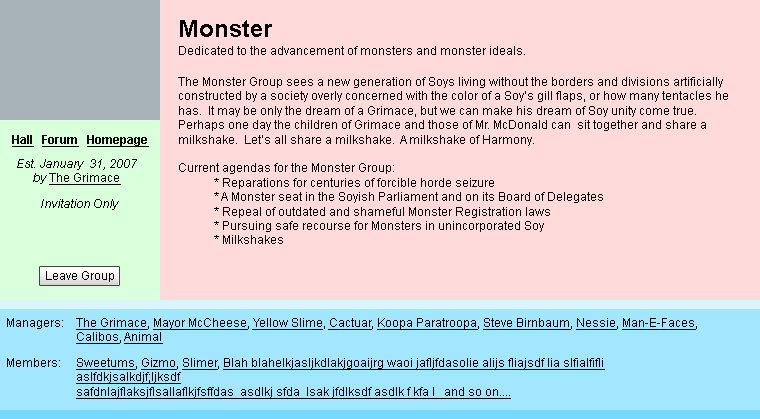
<style>
.page{position:relative;width:760px;height:419px;background:#ffdada}
.page>*{position:absolute;margin:0}
.t1{font:12px "ArialMT";color:#000000}
.t2{font:24px "Arial-BoldMT";color:#000000}
.t3{font:12px/18px "ArialMT";color:#000000}
.t4{font:12px "Arial-BoldMT";color:#000000;text-decoration:underline}
.t5{font:12px "Arial-ItalicMT";color:#000000}
.t6{font:12px "ArialMT";color:#000000;text-decoration:underline}
</style>
<div class="page">
<p class="t1" style="left:179px;top:20px;width:346px;height:35px"><span class="t2">Monster<br></span><span class="t3">Dedicated to the advan</span>cement of monsters and monster ideals.</p>
<p class="t1" style="left:178px;top:77px;width:550px;height:167px">The Monster Group sees a new generation of Soys living without the borders and divisions artificially <br>constructed by a society overly concerned with the color of a Soy’s gill flaps, or how many tentacles he<br>has.  It may be only the dream of a Grimace, but we can make his dream of Soy unity come true.<br>Perhaps one day the children of Grimace and those of Mr. McDonald can  sit together and share a<br>milkshake.  Let’s all share a milkshake.  A milkshake of Harmony.<br><br>Current agendas for the Monster Group:<br> * Reparations for centuries of forcible horde seizure<br> * A Monster seat in the Soyish Parliament and on its Board of Delegates<br> * Repeal of outdated and shameful Monster Registration laws<br> * Pursuing safe recourse for Monsters in unincorporated Soy<br> * Milkshakes</p>
<p class="t4" style="left:12px;top:135px;width:137px;height:12px">Hall   Forum   Homepage</p>
<p class="t5" style="left:17px;top:159px;width:120px;height:26px;text-align:center">Est. January  31, 2007<br>by <span class="t6">The Grimace</span></p>
<p class="t5" style="left:41px;top:199px;width:78px;height:11px">Invitation Only</p>
<p class="t1" style="left:46px;top:271px;width:68px;height:11px">Leave Group</p>
<p class="t1" style="left:7px;top:318px;width:56px;height:11px">Managers:</p>
<p class="t6" style="left:76px;top:318px;width:621px;height:26px">The Grimace<span class="t1">, </span>Mayor McCheese<span class="t1">, </span>Yellow Slime<span class="t1">, </span>Cactuar<span class="t1">, </span>Koopa Paratroopa<span class="t1">, </span>Steve Birnbaum<span class="t1">, </span>Nessie<span class="t1">, </span>Man-E-Faces<span class="t1">,<br></span>Calibos<span class="t1">, </span>Animal</p>
<p class="t1" style="left:7px;top:358px;width:53px;height:9px">Members:</p>
<p class="t6" style="left:76px;top:358px;width:529px;height:41px">Sweetums<span class="t1">, </span>Gizmo<span class="t1">, </span>Slimer<span class="t1">, </span>Blah blahelkjasljkdlakjgoaijrg waoi jafljfdasolie alijs fliajsdf lia slfialfifli<br>aslfdkjsalkdjf;ljksdf<br>safdnlajflaksjflsallaflkjfsffdas  asdlkj sfda  lsak jfdlksdf asdlk f kfa l   and so on....</p>
</div>
